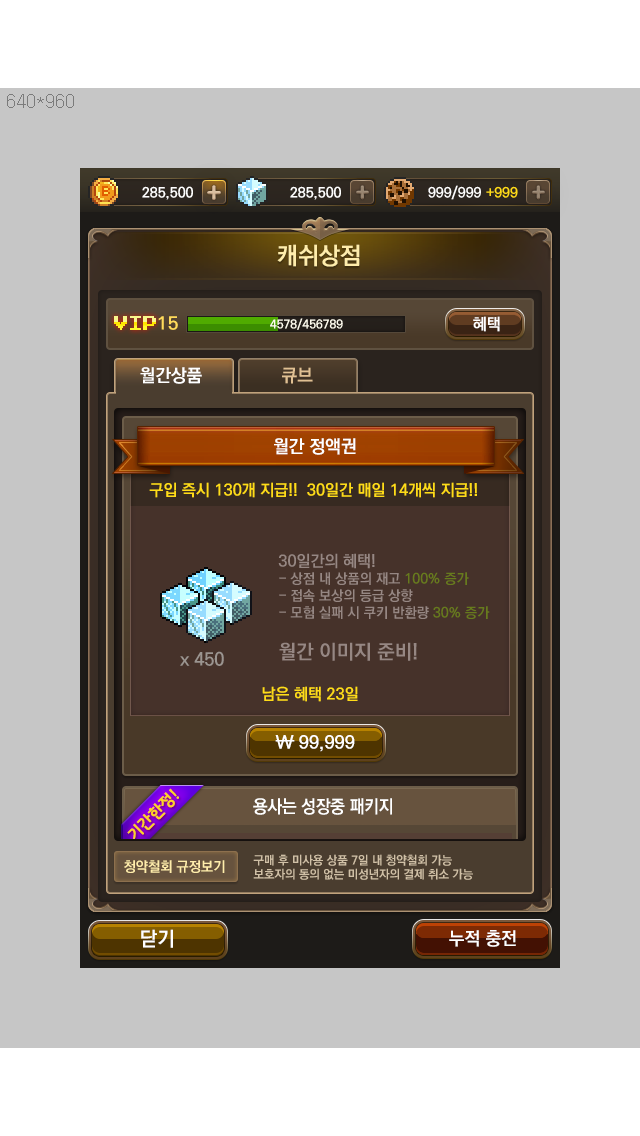
<style>
.page{position:relative;width:640px;height:1136px;background:#c6c6c6}
.page>*{position:absolute;margin:0}
.t1{font:24px "KoPubDotumBold";color:#ffedab}
.t2{font:16px "PressStart2P";letter-spacing:-0.03em;scale:0.92 1}
.t3{font:16px "PressStart2P";letter-spacing:-0.08em;scale:0.92 1}
.t4{font:18px "KoPubDotumBold";color:#ffda5b;scale:1.04 1}
.t5{font:12px "KoPubDotumBold";color:#fffcee}
.t6{font:16px "KoPubDotumBold";color:#ffffff}
.t7{font:18px "KoPubDotumBold";color:#fefefe}
.t8{font:18px "KoPubDotumBold";color:#e0c093}
.t9{font:18px "KoPubDotumBold";color:#ffffff}
.t10{font:16px "KoPubDotumBold";color:#ffdc18}
.t11{font:14px "KoPubDotumBold";color:#968783}
.t12{font:16px "KoPubDotumBold";color:#968783}
.t13{font:20px "KoPubDotumBold";color:#968783}
.t14{font:18px "KoPubDotumBold";color:#9b9590}
.t15{font:18px "KoPubDotumBold";color:#ffffff;scale:2.12 1}
.t16{font:12px "KoPubDotumBold";color:#d0c0a6}
.t17{font:14px "KoPubDotumBold";color:#ffedab}
.t18{font:20px "KoPubDotumBold";color:#ffffff}
</style>
<div class="page">
<p class="t1" style="left:277px;top:244px;width:83px;height:23px">캐쉬상점</p>
<p class="t2" style="left:114px;top:316px;width:42px;height:14px"><span class="t3">V</span>IP</p>
<p class="t4" style="left:158px;top:316px;width:20px;height:14px">15</p>
<p class="t5" style="left:270px;top:318px;width:73px;height:12px">4578/456789</p>
<p class="t6" style="left:473px;top:316px;width:27px;height:16px">혜택</p>
<p class="t7" style="left:140px;top:367px;width:62px;height:17px">월간상품</p>
<p class="t8" style="left:282px;top:367px;width:31px;height:17px">큐브</p>
<p class="t9" style="left:274px;top:438px;width:82px;height:17px">월간 정액권</p>
<p class="t10" style="left:149px;top:482px;width:328px;height:16px">구입 즉시 130개 지급!!  30일간 매일 14개씩 지급!!</p>
<p class="t11" style="left:278px;top:553px;width:212px;height:108px"><span class="t12">30일간의 혜택!<br></span>- 상점 내 상품의 재고 100% 증가<br>- 접속 보상의 등급 상향<br>- 모험 실패 시 쿠키 반환량 30% 증가<br><br><span class="t13">월간 이미지 준비!</span></p>
<p class="t14" style="left:180px;top:651px;width:44px;height:15px">x 450</p>
<p class="t10" style="left:262px;top:686px;width:96px;height:16px">남은 혜택 23일</p>
<p class="t9" style="left:275px;top:735px;width:19px;height:14px">W</p>
<p class="t9" style="left:299px;top:735px;width:56px;height:17px">99,999</p>
<p class="t15" style="left:275px;top:740px;width:20px;height:2px">-</p>
<p class="t16" style="left:253px;top:854px;width:220px;height:26px">구매 후 미사용 상품 7일 내 청약철회 가능<br>보호자의 동의 없는 미성년자의 결제 취소 가능</p>
<p class="t17" style="left:124px;top:860px;width:101px;height:13px">청약철회 규정보기</p>
<p class="t18" style="left:141px;top:929px;width:32px;height:19px">닫기</p>
<p class="t9" style="left:449px;top:930px;width:67px;height:17px">누적 충전</p>
</div>
